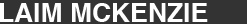
<style>
.page{position:relative;width:247px;height:24px;background:#333333}
.page>*{position:absolute;margin:0}
.t1{font:26.5px "Helvetica-Bold";color:#ffffff}
</style>
<div class="page">
<p class="t1" style="left:0px;top:3px;width:208px;height:19px">LAIM MCKENZIE</p>
</div>
